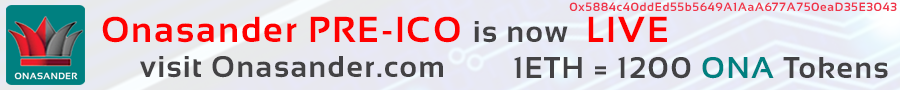
<style>
.page{position:relative;width:900px;height:90px}
.page>*{position:absolute;margin:0}
.t1{font:12px "Sansation-Bold";letter-spacing:0.05em;color:#ef364b}
.t2{font:36px "Sansation-Bold";letter-spacing:0.05em;color:#ff0000}
.t3{font:30px "Sansation-Bold";letter-spacing:0.05em;color:#434244}
.t4{font:30px "Sansation-Bold";letter-spacing:0.05em;color:#008080}
</style>
<div class="page">
<p class="t1" style="left:569px;top:2px;width:328px;height:10px">0x5884c40ddEd55b5649A1AaA677A750eaD35E3043</p>
<p class="t2" style="left:102px;top:16px;width:565px;height:27px">Onasander PRE-ICO <span class="t3">is now </span>LIVE</p>
<p class="t3" style="left:514px;top:56px;width:374px;height:23px">1ETH = 1200 <span class="t4">ONA</span> Tokens</p>
</div>
